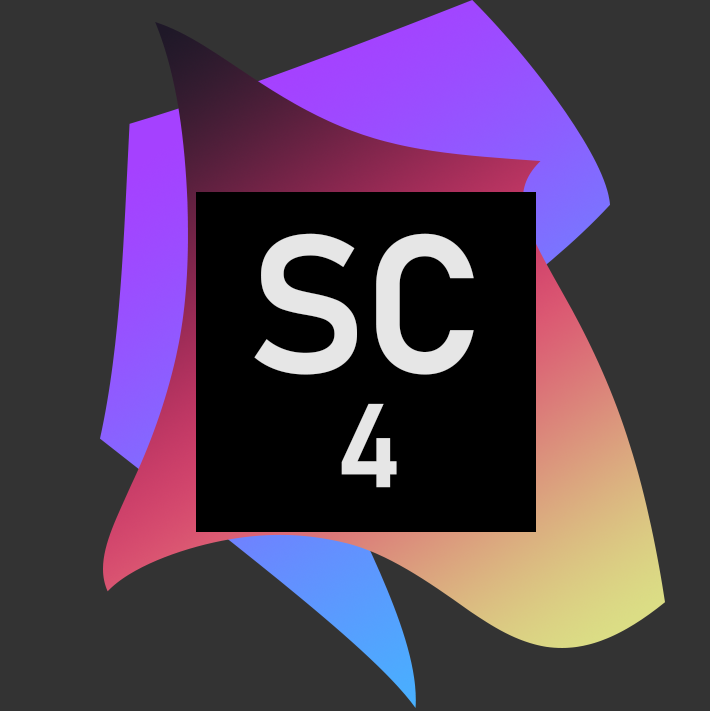
<style>
.page{position:relative;width:710px;height:711px;background:#333333}
.page>*{position:absolute;margin:0}
.t1{font:194.4px "Bahnschrift-SemiBold";color:#e6e6e6}
.t2{font:116.7px "Bahnschrift-SemiBold";color:#e6e6e6}
</style>
<div class="page">
<p class="t1" style="left:254px;top:233px;width:220px;height:142px">SC</p>
<p class="t2" style="left:341px;top:403px;width:56px;height:85px">4</p>
</div>
